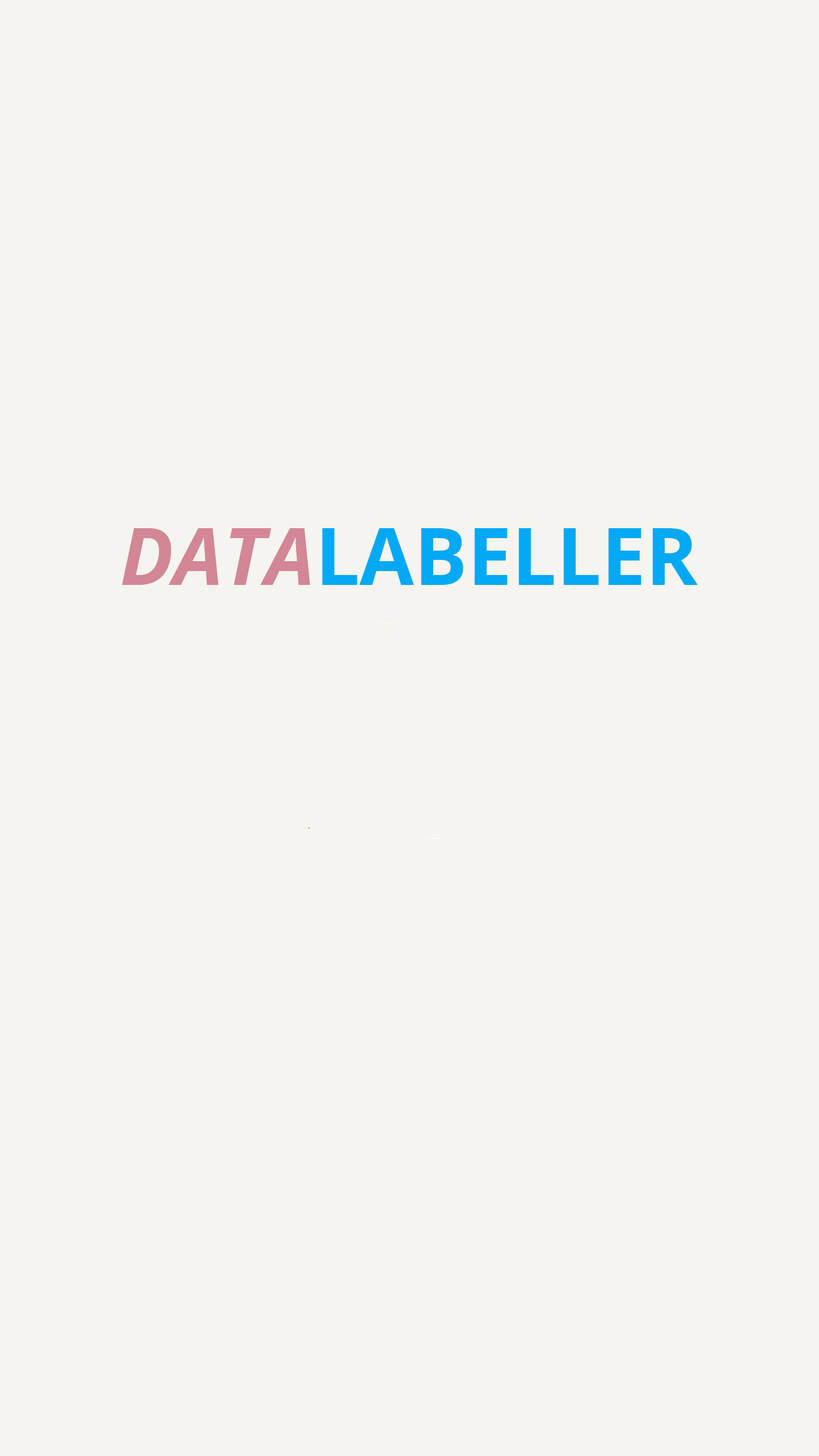
<style>
.page{position:relative;width:819px;height:1456px;background:#f5f4f0}
.page>*{position:absolute;margin:0}
.t1{font:79.1px "OpenSans-Bold";color:#03a9f4}
.t2{font:79.1px "OpenSans-BoldItalic";color:#d38693}
</style>
<div class="page">
<p class="t1" style="left:122px;top:528px;width:576px;height:57px"><span class="t2">DATA</span>LABELLER</p>
</div>
